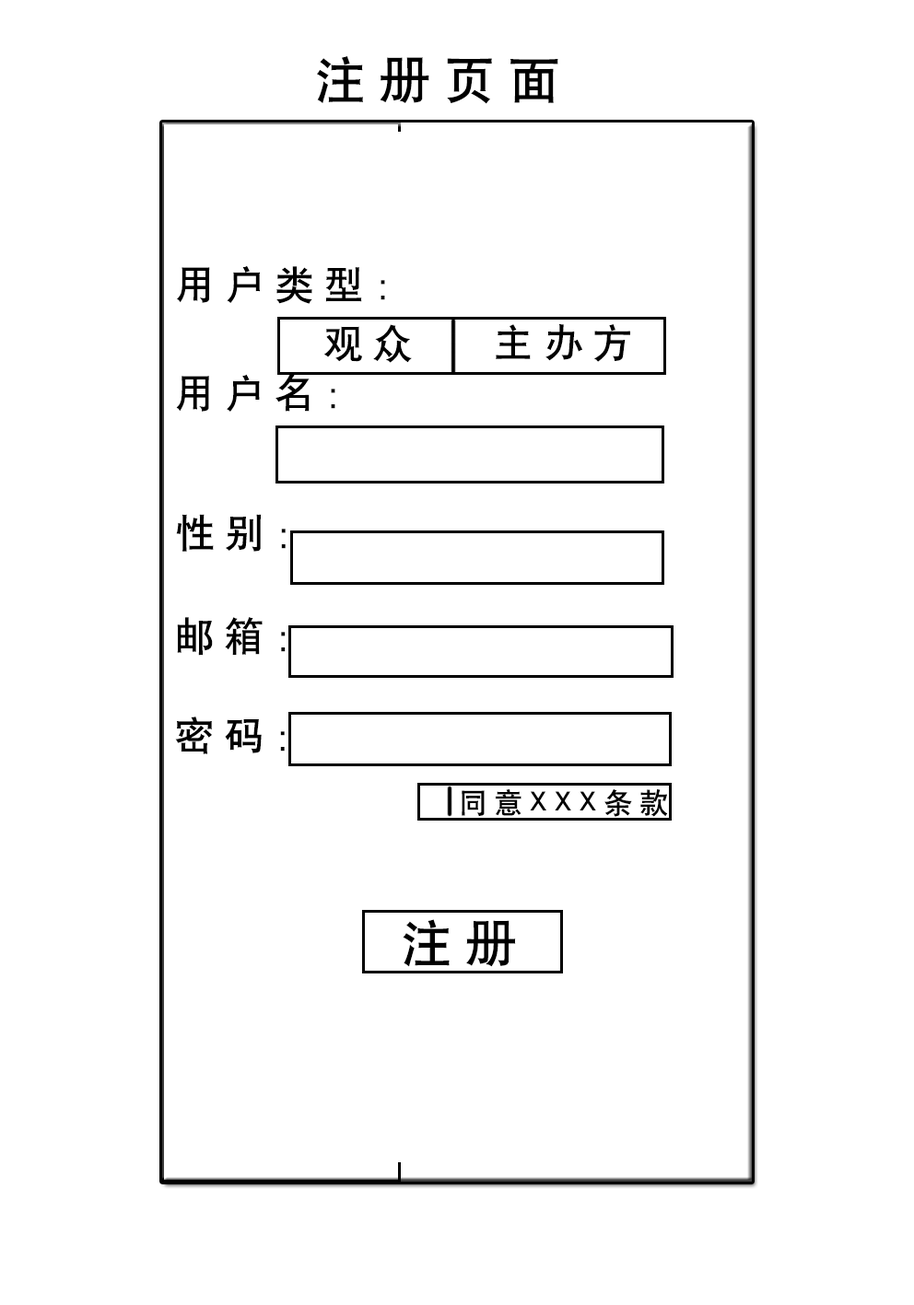
<style>
.page{position:relative;width:914px;height:1305px;background:#ffffff}
.page>*{position:absolute;margin:0}
.t1{font:51.3px "ç»å¸é»ä½ç®-regular";letter-spacing:0.26em;color:#000000}
.t2{font:39.3px "ç»å¸é»ä½ç®-regular";letter-spacing:0.26em;color:#000000}
.t3{font:28.2px "ç»å¸é»ä½ç®-regular";letter-spacing:0.26em;color:#000000}
</style>
<div class="page">
<p class="t1" style="left:317px;top:56px;width:241px;height:48px">注册页面</p>
<p class="t2" style="left:177px;top:265px;width:208px;height:39px">用户类型：</p>
<p class="t2" style="left:324px;top:324px;width:88px;height:39px">观众</p>
<p class="t2" style="left:496px;top:324px;width:134px;height:38px">主办方</p>
<p class="t2" style="left:176px;top:373px;width:159px;height:39px">用户名：</p>
<p class="t2" style="left:176px;top:514px;width:110px;height:38px">性别：</p>
<p class="t2" style="left:177px;top:617px;width:109px;height:39px">邮箱：</p>
<p class="t2" style="left:175px;top:717px;width:110px;height:37px">密码：</p>
<p class="t3" style="left:461px;top:789px;width:207px;height:28px">同意XXX条款</p>
<p class="t1" style="left:402px;top:919px;width:114px;height:48px">注册</p>
</div>
